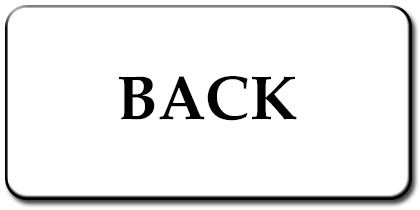
<style>
.page{position:relative;width:420px;height:210px;background:#ffffff}
.page>*{position:absolute;margin:0}
.t1{font:61.4px "PalatinoLinotype-Bold";color:#000000}
</style>
<div class="page">
<p class="t1" style="left:119px;top:76px;width:178px;height:45px">BACK</p>
</div>
